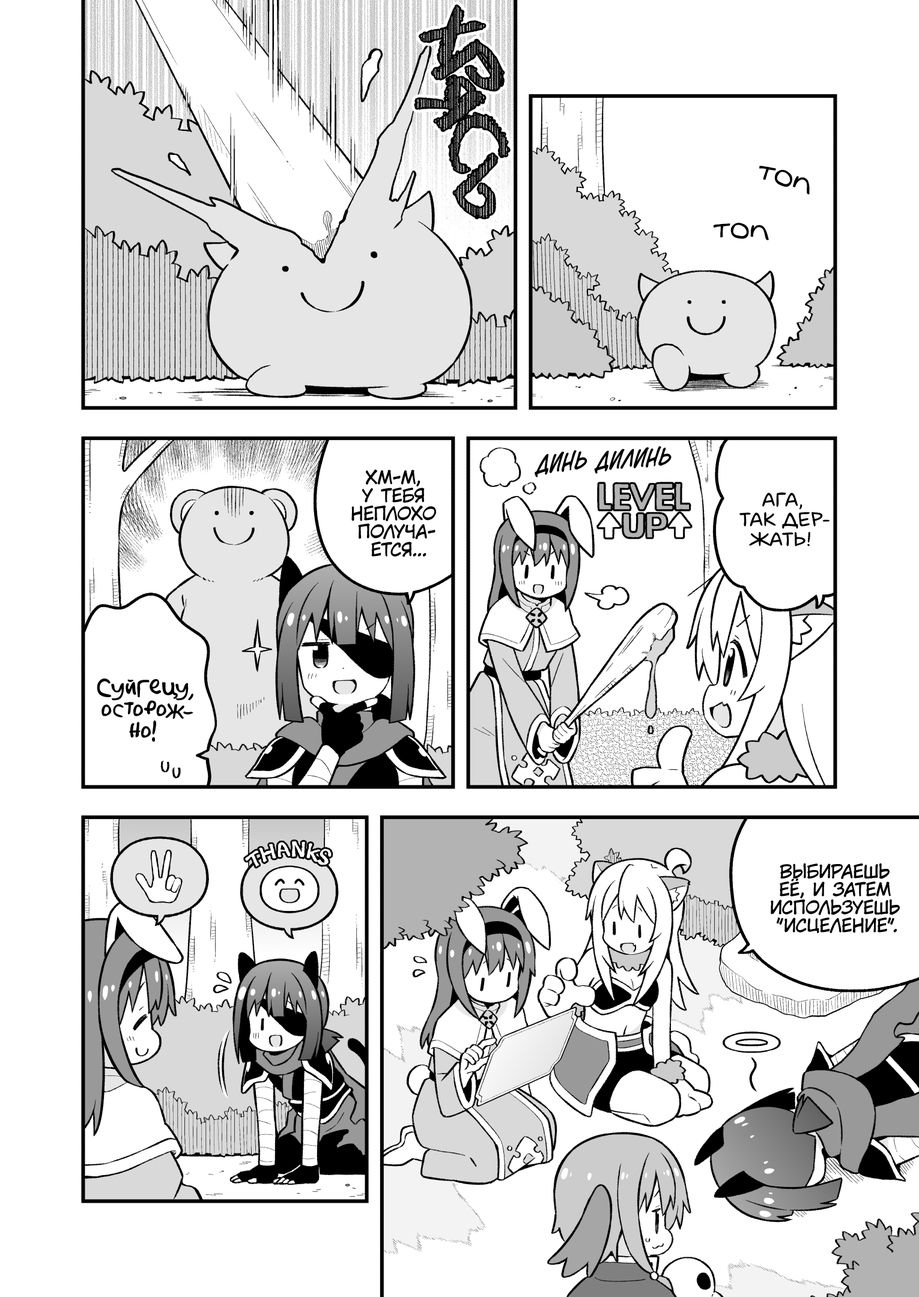
<style>
.page{position:relative;width:919px;height:1297px;background:#ffffff}
.page>*{position:absolute;margin:0}
.t1{font:72.1px "DSEraserCyr";font-weight:bold}
.t2{font:28.8px "v_Augie";color:#000000}
.t3{font:21.6px "v_CCDearDiary";color:#000000;text-transform:uppercase}
.t4{font:18px "KuraiVoice2";color:#000000;text-transform:uppercase}
.t5{font:19.8px "laCartoonerie";color:#000000;text-transform:uppercase}
.t6{font:21.6px "AkbarPlain";color:#000000}
</style>
<div class="page">
<p class="t1" style="left:420px;top:6px;width:65px;height:61px;rotate:47deg">х</p>
<p class="t1" style="left:450px;top:114px;width:59px;height:58px;rotate:85deg">с</p>
<p class="t1" style="left:454px;top:154px;width:43px;height:64px;rotate:46deg">ь</p>
<p class="t2" style="left:759px;top:166px;width:51px;height:29px;rotate:18deg">топ</p>
<p class="t2" style="left:713px;top:223px;width:56px;height:17px;rotate:4deg">топ</p>
<p class="t3" style="left:535px;top:450px;width:52px;height:28px;rotate:-6deg">динь</p>
<p class="t3" style="left:594px;top:446px;width:78px;height:28px;rotate:-4deg">дилинь</p>
<p class="t4" style="left:351px;top:470px;width:85px;height:87px;text-align:center">Хм-м,<br>у тебя<br>неплохо<br>получа-<br>ется...</p>
<p class="t5" style="left:739px;top:493px;width:91px;height:54px;text-align:center">Ага,<br>так дер-<br>жать!</p>
<p class="t6" style="left:97px;top:679px;width:96px;height:63px;text-align:center">Суйгецу,<br>осторож-<br>но!</p>
<p class="t4" style="left:771px;top:863px;width:129px;height:71px;text-align:center">Выбираешь<br>её, и затем<br>используешь<br>"исцеление".</p>
</div>
